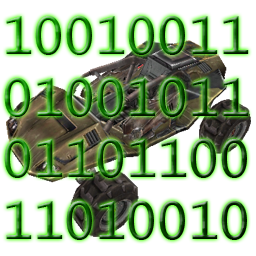
<style>
.page{position:relative;width:256px;height:256px;background:#ffffff}
.page>*{position:absolute;margin:0}
.t1{font:51.5px "LucidaConsole"}
</style>
<div class="page">
<p class="t1" style="left:4px;top:16px;width:245px;height:224px;text-align:center">10010011<br>01001011<br>01101100<br>11010010</p>
</div>
